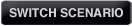
<style>
.page{position:relative;width:132px;height:26px}
.page>*{position:absolute;margin:0}
.t1{font:12.1px "Helvetica-Bold";color:#d8d3d3}
</style>
<div class="page">
<p class="t1" style="left:9px;top:8px;width:114px;height:10px">SWITCH SCENARIO</p>
</div>
